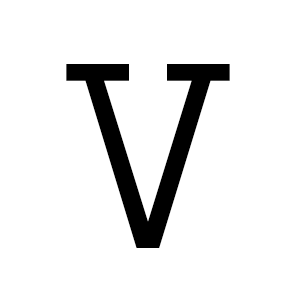
<style>
.page{position:relative;width:300px;height:300px;background:#ffffff}
.page>*{position:absolute;margin:0}
.t1{font:300px "PrestigeEliteStd-Bd";color:#000000}
</style>
<div class="page">
<p class="t1" style="left:66px;top:64px;width:164px;height:184px">V</p>
</div>
